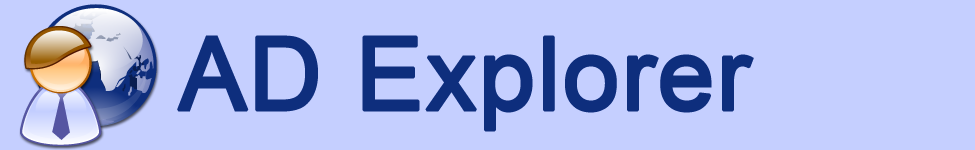
<style>
.page{position:relative;width:975px;height:150px;background:#c5cfff}
.page>*{position:absolute;margin:0}
.t1{font:101px "ArialMT";color:#0e2e7d;font-weight:bold}
</style>
<div class="page">
<p class="t1" style="left:177px;top:35px;width:577px;height:97px">AD Explorer</p>
</div>
